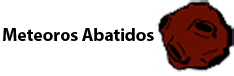
<style>
.page{position:relative;width:234px;height:76px;background:#ffffff}
.page>*{position:absolute;margin:0}
.t1{font:18px "MyriadPro-Bold";color:#000000}
</style>
<div class="page">
<p class="t1" style="left:3px;top:28px;width:151px;height:13px">Meteoros Abatidos</p>
</div>
